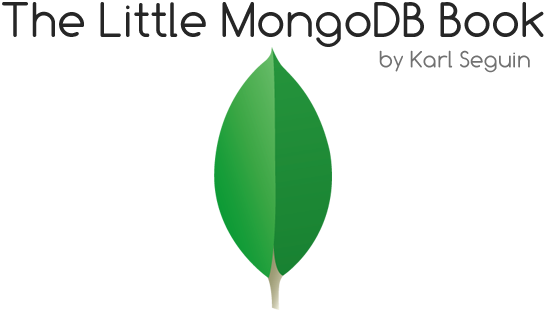
<style>
.page{position:relative;width:545px;height:311px;background:#ffffff}
.page>*{position:absolute;margin:0}
.t1{font:50px "Comfortaa";color:#262626}
.t2{font:24px "Comfortaa";color:#717171}
</style>
<div class="page">
<p class="t1" style="left:2px;top:2px;width:542px;height:45px">The Little MongoDB Book</p>
<p class="t2" style="left:379px;top:50px;width:151px;height:23px">by Karl Seguin</p>
</div>
